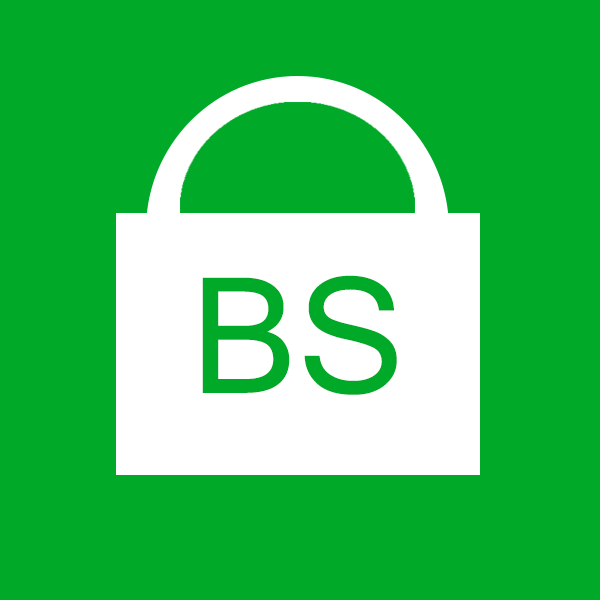
<style>
.page{position:relative;width:600px;height:600px;background:#00a928}
.page>*{position:absolute;margin:0}
.t1{font:160.6px "MicrosoftSansSerif";color:#00a928}
</style>
<div class="page">
<p class="t1" style="left:202px;top:275px;width:195px;height:120px">BS</p>
</div>
